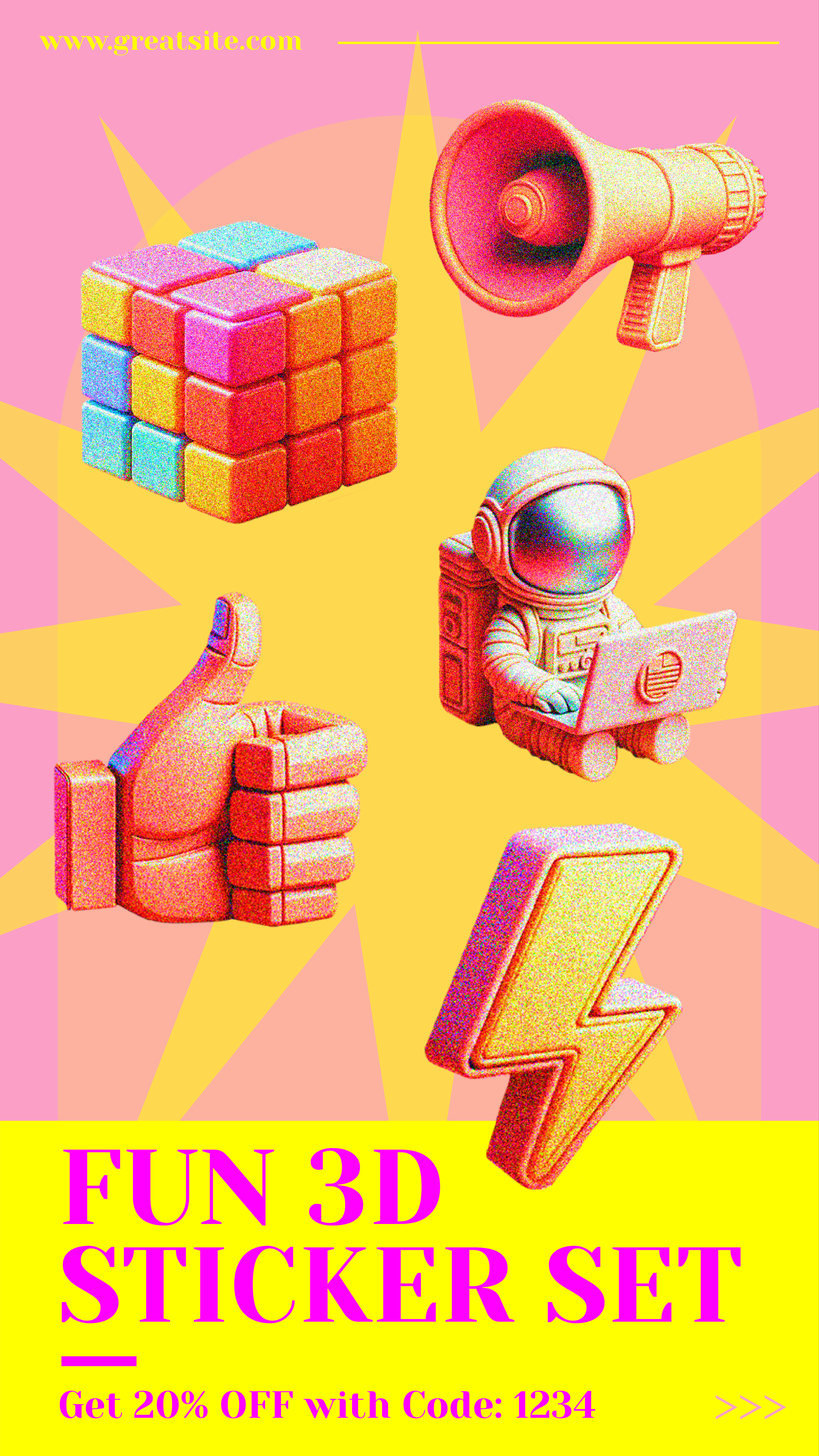
<style>
.page{position:relative;width:819px;height:1456px}
.page>*{position:absolute;margin:0}
.t1{font:27.3px "YesevaOne-Regular";color:#ffff00}
.t2{font:106.2px "YesevaOne-Regular";color:#ff00ff}
.t3{font:37.9px "YesevaOne-Regular";color:#ff00ff}
.t4{font:48.5px "YesevaOne-Regular";color:#fb9fc7}
</style>
<div class="page">
<p class="t1" style="left:39px;top:31px;width:263px;height:24px">www.greatsite.com</p>
<p class="t2" style="left:62px;top:1148px;width:679px;height:175px">FUN 3D STICKER SET</p>
<p class="t3" style="left:60px;top:1390px;width:535px;height:28px">Get 20% OFF with Code: 1234</p>
<p class="t4" style="left:716px;top:1395px;width:70px;height:24px">&gt;&gt;&gt;</p>
</div>
